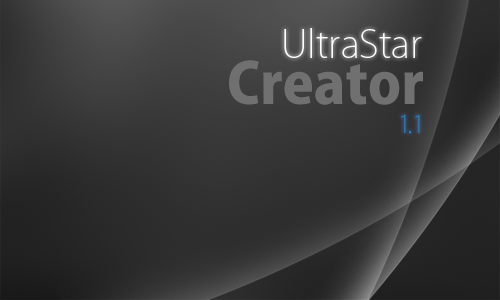
<style>
.page{position:relative;width:500px;height:300px}
.page>*{position:absolute;margin:0}
.t1{font:38px "KozGoPro-ExtraLight";color:#ffffff}
.t2{font:56px "KozGoPro-Heavy";color:#707070}
.t3{font:24px "KozGoPro-ExtraLight";color:#00aeef}
</style>
<div class="page">
<p class="t1" style="left:284px;top:28px;width:138px;height:30px">UltraStar</p>
<p class="t2" style="left:229px;top:60px;width:194px;height:45px">Creator</p>
<p class="t3" style="left:401px;top:115px;width:19px;height:19px">1.1</p>
</div>
